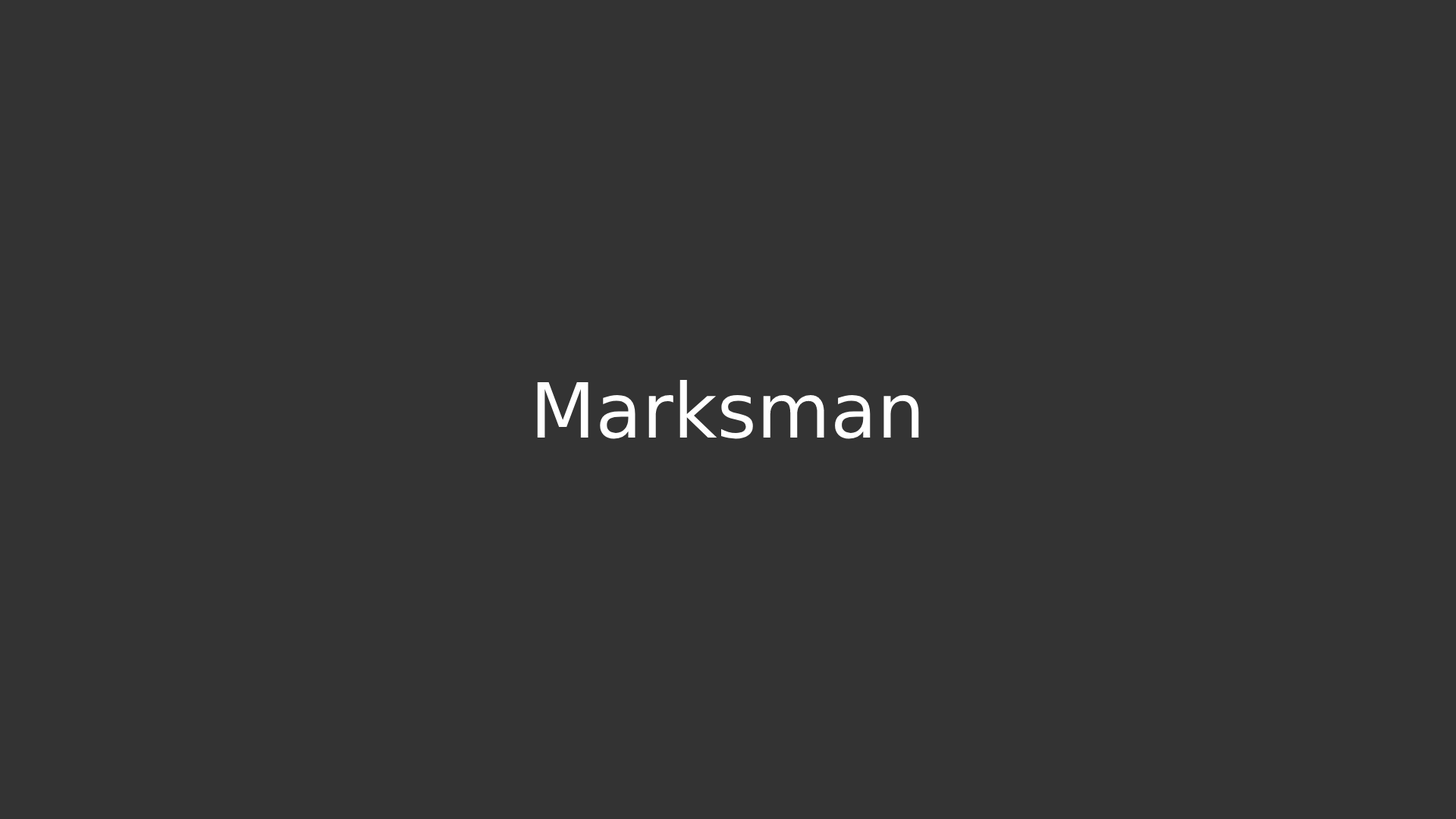
<style>
.page{position:relative;width:1456px;height:819px;background:#333333}
.page>*{position:absolute;margin:0}
.t1{font:75.8px "DejaVuSans";color:#ffffff}
</style>
<div class="page">
<p class="t1" style="left:537px;top:380px;width:382px;height:59px">Marksman</p>
</div>
